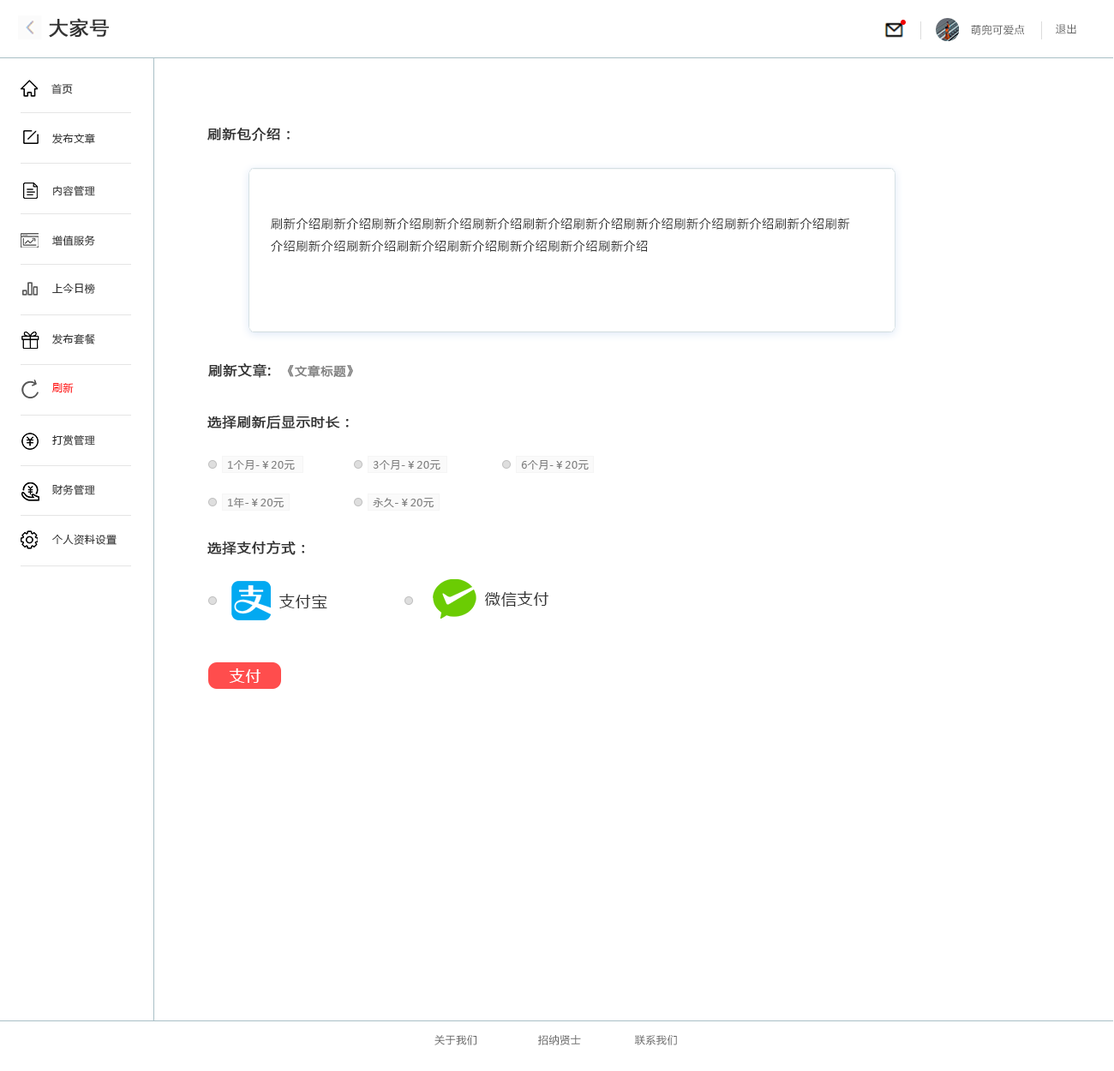
<style>
.page{position:relative;width:1114px;height:1071px;background:#ffffff}
.page>*{position:absolute;margin:0}
.t1{font:18.8px "MicrosoftYaHei";letter-spacing:0.05em;color:#333333;font-weight:bold}
.t2{font:10.3px "MicrosoftYaHei";letter-spacing:0.05em;color:#666666}
.t3{font:10.3px "MicrosoftYaHei";letter-spacing:0.05em;color:#333333}
.t4{font:13.7px "MicrosoftYaHei";letter-spacing:0.05em;color:#333333;font-weight:bold}
.t5{font:12px/5.1px "MicrosoftYaHei";letter-spacing:0.05em;color:#333333}
.t6{font:12px "MicrosoftYaHei";letter-spacing:0.05em;color:#808080;font-weight:bold}
.t7{font:10.3px "MicrosoftYaHei";letter-spacing:0.05em;color:#ff0000}
.t8{font:10.3px "MicrosoftYaHei";letter-spacing:0.05em;color:#808080}
.t9{font:15.4px "MicrosoftYaHei";letter-spacing:0.05em;color:#333333}
.t10{font:15.4px "MicrosoftYaHei";letter-spacing:0.05em;color:#ffffff}
</style>
<div class="page">
<p class="t1" style="left:49px;top:18px;width:60px;height:20px">大家号</p>
<p class="t2" style="left:971px;top:25px;width:54px;height:10px">萌兜可爱点</p>
<p class="t2" style="left:1055px;top:24px;width:21px;height:10px">退出</p>
<p class="t3" style="left:51px;top:83px;width:22px;height:11px">首页</p>
<p class="t3" style="left:52px;top:133px;width:43px;height:11px">发布文章</p>
<p class="t4" style="left:207px;top:128px;width:83px;height:13px">刷新包介绍：</p>
<p class="t3" style="left:53px;top:185px;width:42px;height:11px">内容管理</p>
<p class="t5" style="left:271px;top:218px;width:579px;height:34px">刷新介绍刷新介绍刷新介绍刷新介绍刷新介绍刷新介绍刷新介绍刷新介绍刷新介绍刷新介绍刷新介绍刷新<br>介绍刷新介绍刷新介绍刷新介绍刷新介绍刷新介绍刷新介绍刷新介绍</p>
<p class="t3" style="left:52px;top:235px;width:43px;height:11px">增值服务</p>
<p class="t3" style="left:52px;top:283px;width:43px;height:11px">上今日榜</p>
<p class="t3" style="left:52px;top:333px;width:43px;height:11px">发布套餐</p>
<p class="t6" style="left:208px;top:363px;width:145px;height:15px"><span class="t4">刷新文章:  </span>《文章标题》</p>
<p class="t7" style="left:52px;top:383px;width:22px;height:10px">刷新</p>
<p class="t4" style="left:207px;top:415px;width:142px;height:14px">选择刷新后显示时长：</p>
<p class="t3" style="left:52px;top:434px;width:43px;height:11px">打赏管理</p>
<p class="t8" style="left:228px;top:460px;width:67px;height:9px">1个月-￥20元</p>
<p class="t8" style="left:373px;top:460px;width:67px;height:9px">3个月-￥20元</p>
<p class="t8" style="left:521px;top:460px;width:68px;height:9px">6个月-￥20元</p>
<p class="t3" style="left:52px;top:484px;width:43px;height:11px">财务管理</p>
<p class="t8" style="left:228px;top:497px;width:56px;height:11px">1年-￥20元</p>
<p class="t8" style="left:373px;top:498px;width:60px;height:9px">永久-￥20元</p>
<p class="t3" style="left:52px;top:534px;width:65px;height:11px">个人资料设置</p>
<p class="t4" style="left:207px;top:541px;width:98px;height:14px">选择支付方式：</p>
<p class="t9" style="left:279px;top:594px;width:48px;height:14px">支付宝</p>
<p class="t9" style="left:485px;top:591px;width:63px;height:15px">微信支付</p>
<p class="t10" style="left:229px;top:668px;width:31px;height:15px">支付</p>
<p class="t2" style="left:434px;top:1035px;width:243px;height:10px">关于我们                 招纳贤士               联系我们</p>
</div>
